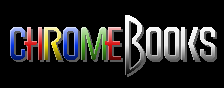
<style>
.page{position:relative;width:224px;height:88px;background:#000000}
.page>*{position:absolute;margin:0}
.t1{font:72px "EarthBound"}
</style>
<div class="page">
<p class="t1" style="left:10px;top:15px;width:205px;height:60px">ChromeBooks</p>
</div>
